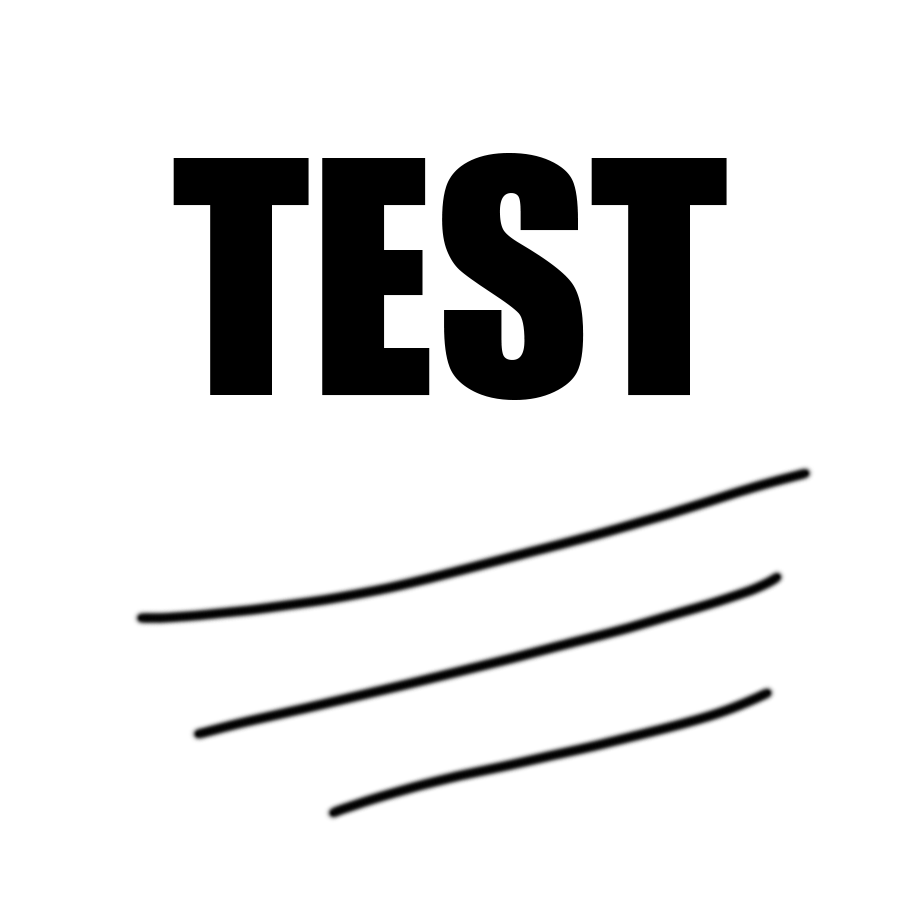
<style>
.page{position:relative;width:900px;height:900px;background:#ffffff}
.page>*{position:absolute;margin:0}
.t1{font:300px "Impact";color:#000000}
</style>
<div class="page">
<p class="t1" style="left:173px;top:153px;width:554px;height:247px">TEST</p>
</div>
